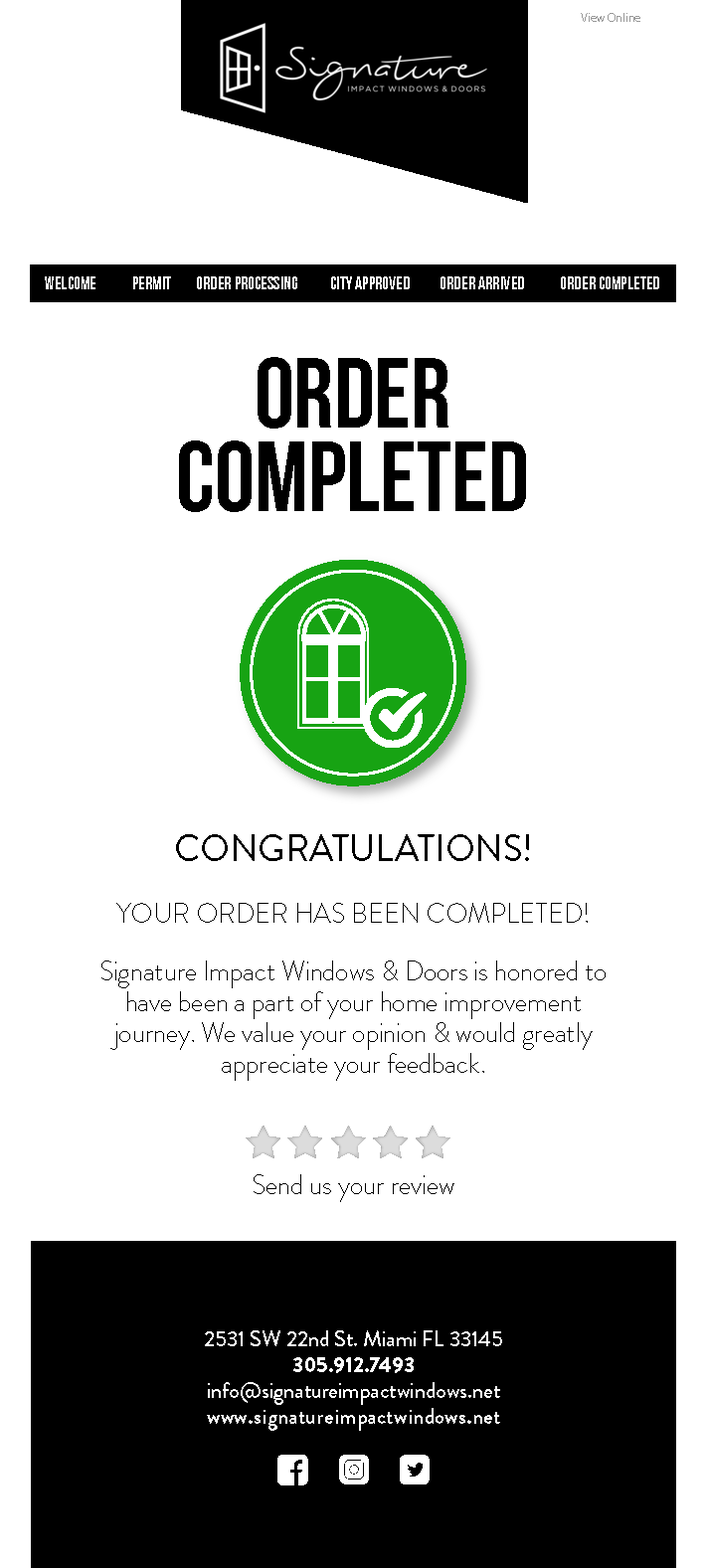
<style>
.page{position:relative;width:707px;height:1568px;background:#ffffff}
.page>*{position:absolute;margin:0}
.t1{font:11.9px "MyriadPro-Regular";color:#999999}
.t2{font:17.5px "BebasNeueBold";color:#ffffff}
.t3{font:99.4px/83.5px "BebasNeueBold";color:#000000}
.t4{font:27.8px/30.8px "BrandonGrotesque-Light";color:#000000;scale:0.97 1}
.t5{font:37.8px/30.8px "BrandonGrotesque-Regular";color:#000000;scale:0.97 1}
.t6{font:27.8px "BrandonGrotesque-Light";color:#000000;scale:0.97 1}
.t7{font:21.9px/25.9px "BrandonGrotesque-Medium";color:#ffffff}
.t8{font:21.9px/25.9px "BrandonGrotesque-Black";color:#ffffff}
.t9{font:21.9px/25.9px "BrandonGrotesque-Bold";letter-spacing:0.015em;color:#ffffff}
</style>
<div class="page">
<p class="t1" style="left:581px;top:13px;width:59px;height:9px">View Online</p>
<p class="t2" style="left:45px;top:276px;width:614px;height:13px">WELCOME             PERMIT         ORDER PROCESSING            CITY APPROVED           ORDER ARRIVED             ORDER COMPLETED</p>
<p class="t3" style="left:179px;top:357px;width:347px;height:155px;text-align:center">ORDER<br>COMPLETED</p>
<p class="t4" style="left:116px;top:834px;width:472px;height:89px;text-align:center"><span class="t5">CONGRATULATIONS!<br><br></span>YOUR ORDER HAS BEEN COMPLETED!</p>
<p class="t4" style="left:101px;top:960px;width:505px;height:121px;text-align:center">Signature Impact Windows &amp; Doors is honored to<br>have been a part of your home improvement<br>journey. We value your opinion &amp; would greatly<br>appreciate your feedback.</p>
<p class="t6" style="left:254px;top:1174px;width:200px;height:28px">Send us your review</p>
<p class="t7" style="left:205px;top:1330px;width:297px;height:101px;text-align:center">2531 SW 22nd St. Miami FL 33145<br><span class="t8">305.912.7493<br></span>info@signatureimpactwindows.net<br><span class="t9">www.signatureimpactwindows.net</span></p>
</div>
